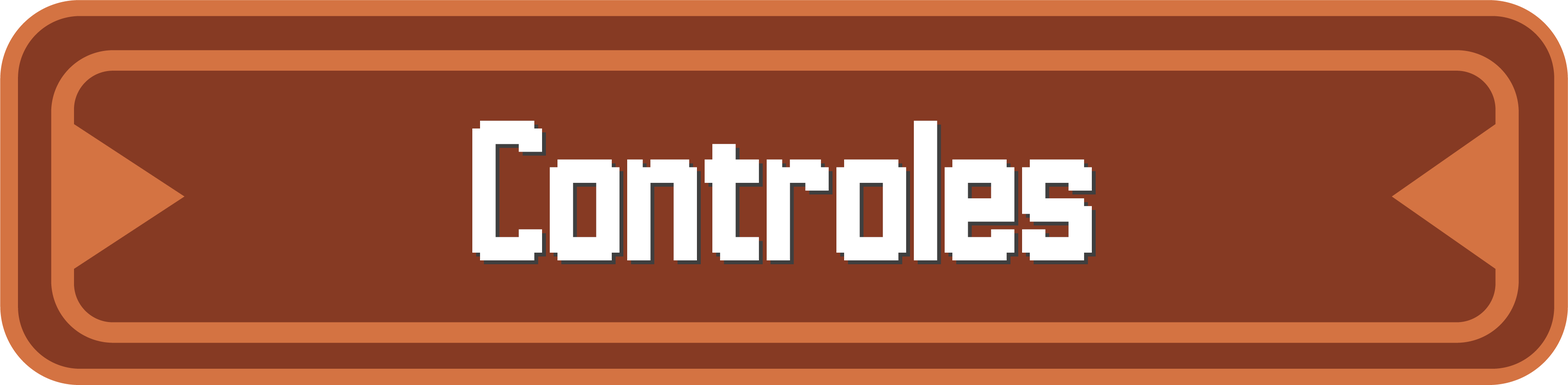
<style>
.page{position:relative;width:1568px;height:385px;background:#863a23}
.page>*{position:absolute;margin:0}
.t1{font:178.3px "Hannover-Messe-Sans";color:#ffffff}
</style>
<div class="page">
<p class="t1" style="left:472px;top:120px;width:620px;height:140px">Controles</p>
<p class="t1" style="left:476px;top:124px;width:620px;height:140px">Controles</p>
</div>
